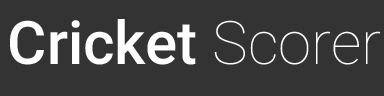
<style>
.page{position:relative;width:384px;height:96px;background:#333333}
.page>*{position:absolute;margin:0}
.t1{font:60px "Roboto-Medium";color:#ffffff}
.t2{font:60px "Roboto-Thin";color:#ffffff}
</style>
<div class="page">
<p class="t1" style="left:10px;top:19px;width:371px;height:46px">Cricket <span class="t2">Scorer</span></p>
</div>
